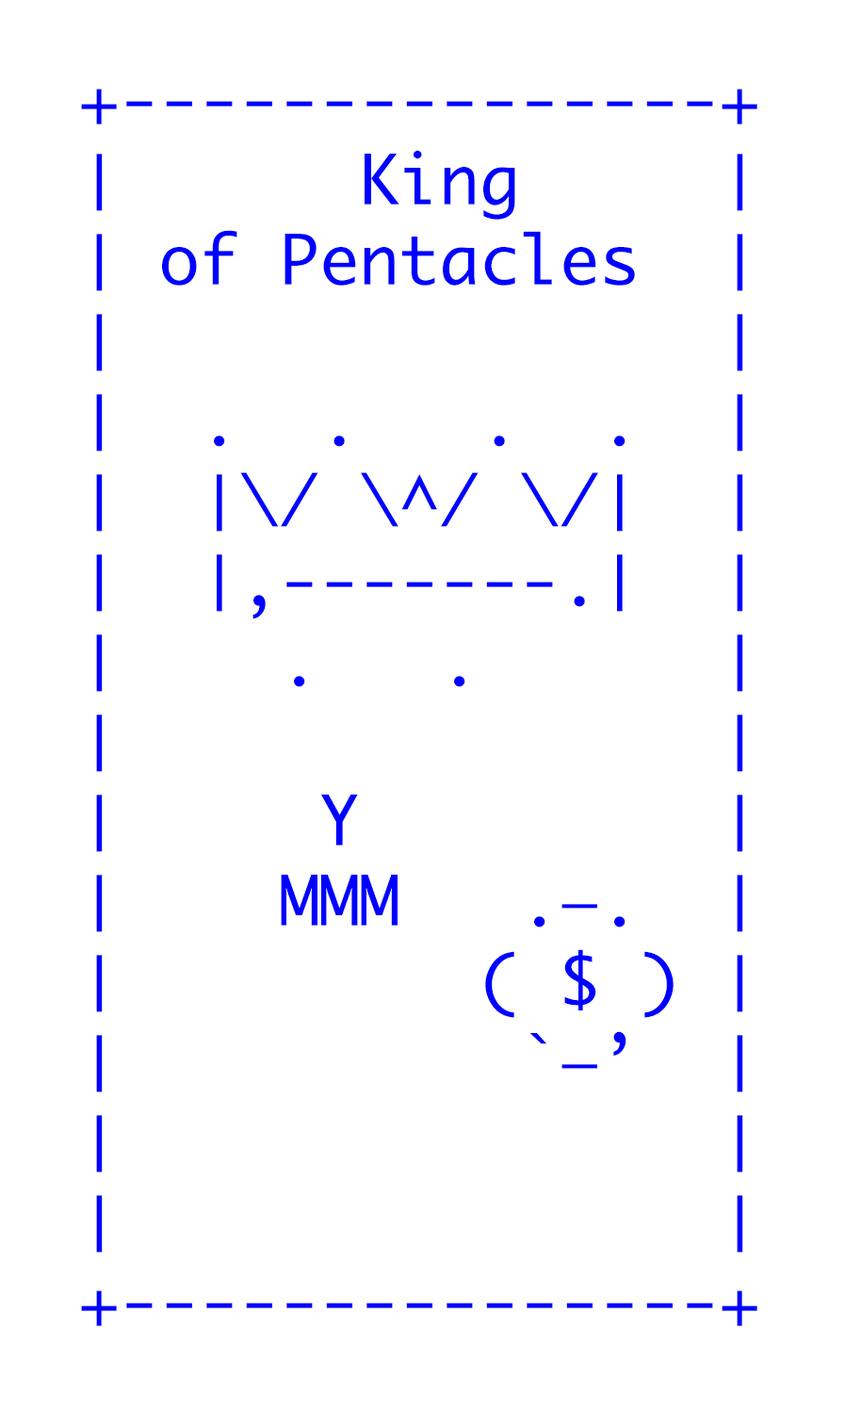
<style>
.page{position:relative;width:845px;height:1411px;background:#ffffff}
.page>*{position:absolute;margin:0}
.t1{font:66.7px "Monaco";color:#0000ff}
</style>
<div class="page">
<p class="t1" style="left:81px;top:89px;width:677px;height:1237px">+---------------+<br>│      King     │<br>│ of Pentacles  │<br>│               │<br>│  .  .   .  .  │<br>│  │\/ \^/ \/│  │<br>│  │,-------.│  │<br>│    .   .      │ <br>│               │ <br>│     Y         │<br>│    MMM   .—.  │ <br>│         ( $ ) │ <br>│          `—’  │<br>│               │<br>│               │<br>+---------------+</p>
</div>
